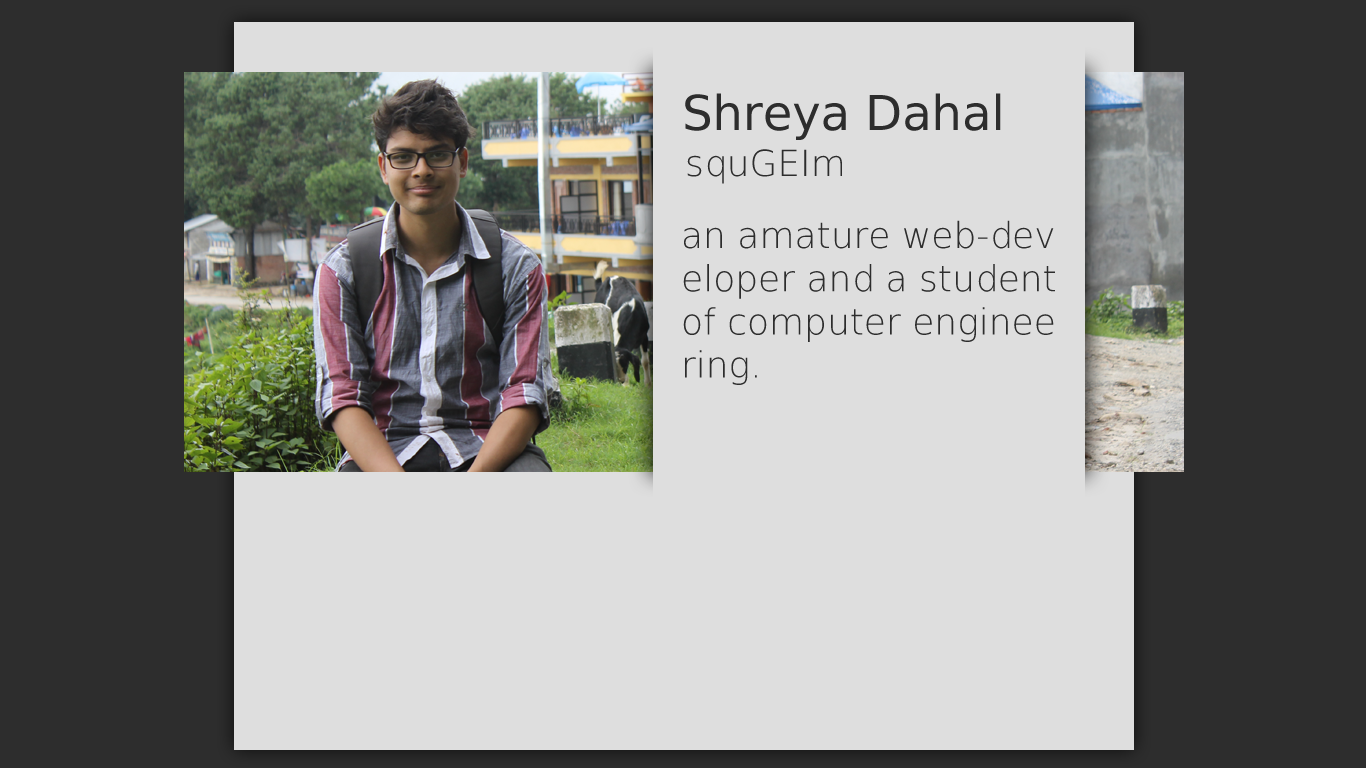
<style>
.page{position:relative;width:1366px;height:768px;background:#dedede}
.page>*{position:absolute;margin:0}
.t1{font:48px "DejaVuSans";color:#2d2d2d}
.t2{font:36px "DejaVuSans-ExtraLight";color:#2d2d2d}
</style>
<div class="page">
<p class="t1" style="left:685px;top:93px;width:316px;height:47px">Shreya Dahal</p>
<p class="t2" style="left:687px;top:149px;width:155px;height:35px">squGEIm</p>
<p class="t2" style="left:683px;top:220px;width:372px;height:165px">an amature web-dev<br>eloper and a student<br>of computer enginee<br>ring.</p>
</div>
